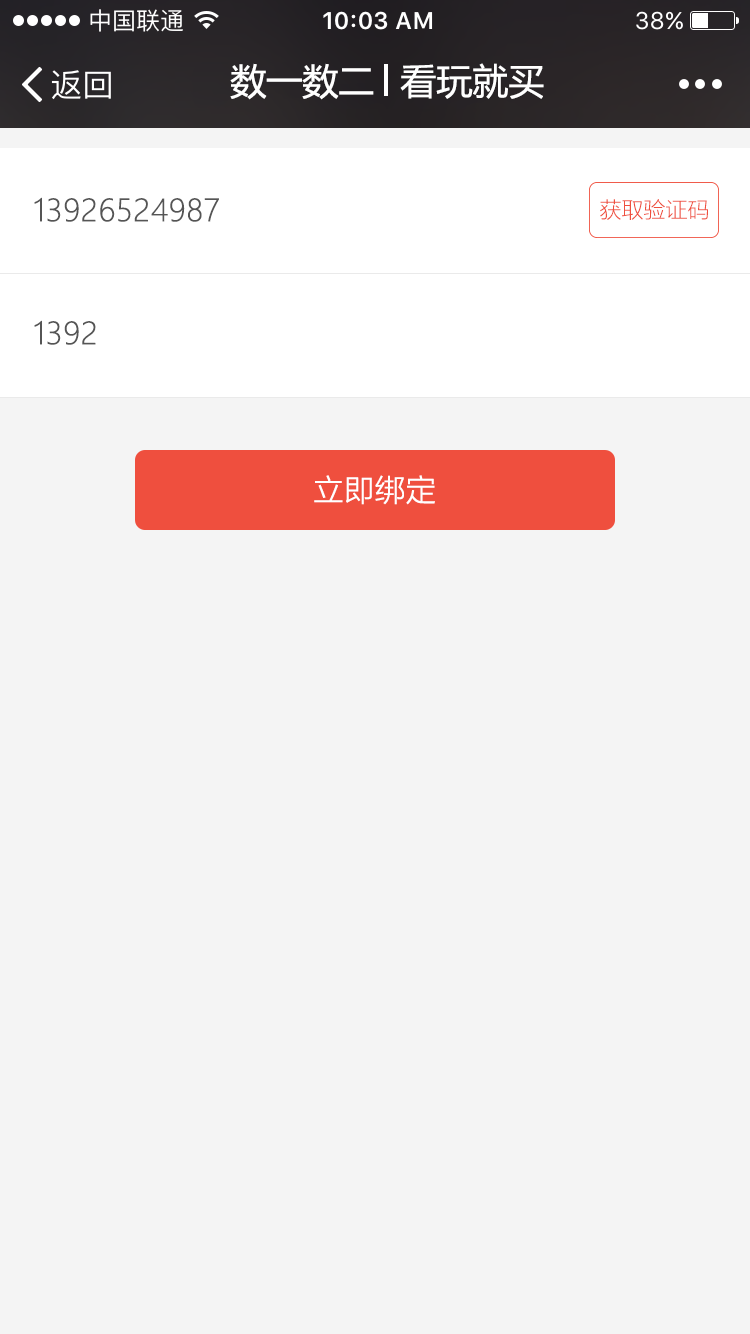
<style>
.page{position:relative;width:750px;height:1334px;background:#f4f4f4}
.page>*{position:absolute;margin:0}
.t1{font:36px "MicrosoftYaHei";color:#ffffff}
.t2{font:30px "MicrosoftYaHeiLight";color:#555555;font-weight:bold}
.t3{font:22px "MicrosoftYaHeiLight";color:#ef4f3e}
.t4{font:30px "MicrosoftYaHeiLight";color:#ffffff;font-weight:bold}
</style>
<div class="page">
<p class="t1" style="left:230px;top:63px;width:144px;height:37px">数一数二</p>
<p class="t1" style="left:400px;top:63px;width:144px;height:36px">看玩就买</p>
<p class="t2" style="left:34px;top:197px;width:185px;height:25px">13926524987</p>
<p class="t3" style="left:600px;top:199px;width:108px;height:21px">获取验证码</p>
<p class="t2" style="left:34px;top:320px;width:62px;height:25px">1392</p>
<p class="t4" style="left:314px;top:475px;width:121px;height:30px">立即绑定</p>
</div>
